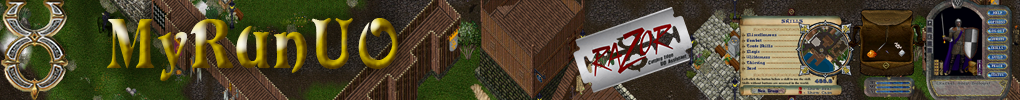
<style>
.page{position:relative;width:1020px;height:100px}
.page>*{position:absolute;margin:0}
.t1{font:67.9px "Avatar";letter-spacing:0.05em}
</style>
<div class="page">
<p class="t1" style="left:106px;top:18px;width:292px;height:63px">MyRunUO</p>
<p class="t1" style="left:106px;top:18px;width:292px;height:63px">MyRunUO</p>
</div>
